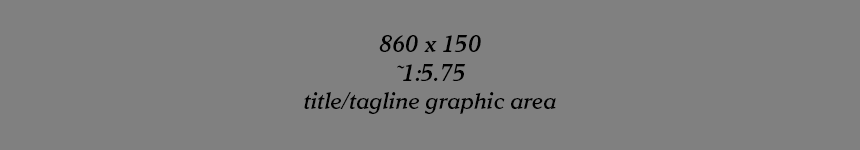
<style>
.page{position:relative;width:860px;height:150px;background:#808080}
.page>*{position:absolute;margin:0}
.t1{font:24px "Kandal-MediumItalic";color:#000000}
</style>
<div class="page">
<p class="t1" style="left:304px;top:35px;width:252px;height:79px;text-align:center">860 x 150<br>~1:5.75<br>title/tagline graphic area</p>
</div>
